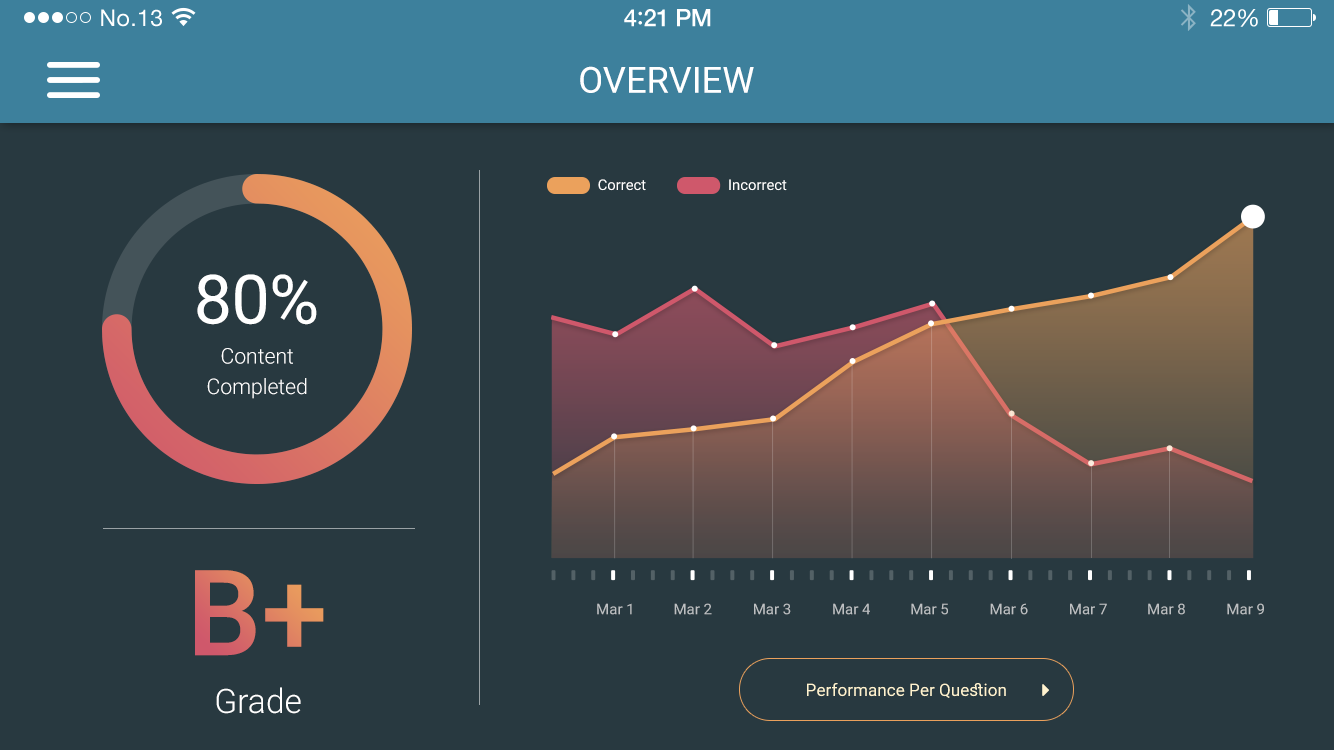
<style>
.page{position:relative;width:1334px;height:750px;background:#283940}
.page>*{position:absolute;margin:0}
.t1{font:36.3px "Heebo-Regular";color:#ffffff;text-transform:uppercase}
.t2{font:14.7px "Heebo-Regular";color:#ffffff}
.t3{font:68.1px "Heebo-Regular";letter-spacing:-0.008em;color:#ffffff}
.t4{font:21.1px/30.5px "Heebo-Light";color:#ffffff}
.t5{font:119.1px "Heebo-Medium"}
.t6{font:15px "Heebo-Regular";color:#bdc0c2}
.t7{font:33.8px "Heebo-Light";color:#ffffff}
.t8{font:17.1px "Heebo-Regular";color:#fff3cf}
</style>
<div class="page">
<p class="t1" style="left:580px;top:66px;width:174px;height:27px">Overview</p>
<p class="t2" style="left:598px;top:179px;width:48px;height:12px">Correct</p>
<p class="t2" style="left:729px;top:179px;width:58px;height:12px">Incorrect</p>
<p class="t3" style="left:197px;top:274px;width:120px;height:51px">80%</p>
<p class="t4" style="left:207px;top:348px;width:100px;height:51px;text-align:center">Content<br>Completed</p>
<p class="t5" style="left:195px;top:570px;width:129px;height:86px">B+</p>
<p class="t6" style="left:597px;top:603px;width:35px;height:12px">Mar 1</p>
<p class="t6" style="left:674px;top:603px;width:38px;height:12px">Mar 2</p>
<p class="t6" style="left:754px;top:603px;width:37px;height:12px">Mar 3</p>
<p class="t6" style="left:833px;top:603px;width:37px;height:12px">Mar 4</p>
<p class="t6" style="left:911px;top:603px;width:37px;height:12px">Mar 5</p>
<p class="t6" style="left:990px;top:603px;width:38px;height:12px">Mar 6</p>
<p class="t6" style="left:1070px;top:603px;width:37px;height:12px">Mar 7</p>
<p class="t6" style="left:1148px;top:603px;width:37px;height:12px">Mar 8</p>
<p class="t6" style="left:1227px;top:603px;width:37px;height:12px">Mar 9</p>
<p class="t7" style="left:216px;top:687px;width:85px;height:27px">Grade</p>
<p class="t8" style="left:807px;top:683px;width:199px;height:15px">Performance Per Question</p>
</div>
